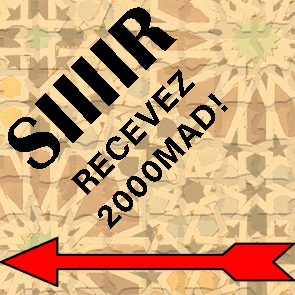
<style>
.page{position:relative;width:295px;height:295px}
.page>*{position:absolute;margin:0}
.t1{font:83.3px "BritannicBold";letter-spacing:0.025em;color:#000000;scale:0.92 1}
.t2{font:33.3px "AcuminConcept-Bold";letter-spacing:0.025em;color:#000000}
</style>
<div class="page">
<p class="t1" style="left:8px;top:7px;width:169px;height:162px;rotate:-45deg">SIIIIR</p>
<p class="t2" style="left:71px;top:69px;width:157px;height:160px;rotate:-46deg">RECEVEZ 2000MAD!</p>
</div>
